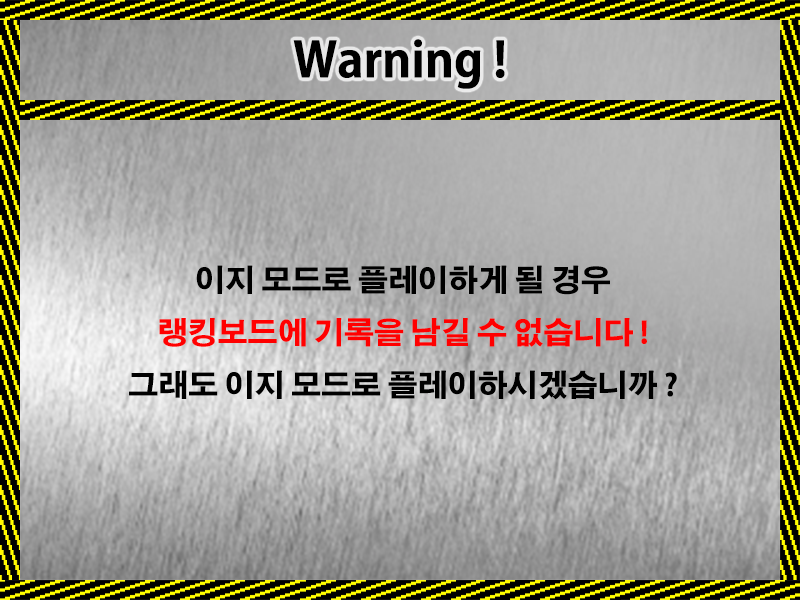
<style>
.page{position:relative;width:800px;height:600px}
.page>*{position:absolute;margin:0}
.t1{font:48.2px "AdobeGothicStd-Bold";color:#000000}
.t2{font:30px "AdobeGothicStd-Bold";color:#000000}
.t3{font:30px "AdobeGothicStd-Bold";color:#ff0000}
</style>
<div class="page">
<p class="t1" style="left:293px;top:39px;width:212px;height:50px">Warning !</p>
<p class="t2" style="left:129px;top:265px;width:548px;height:135px;text-align:center">이지 모드로 플레이하게 될 경우<br><span class="t3">랭킹보드에 기록을 남길 수 없습니다 !<br></span>그래도 이지 모드로 플레이하시겠습니까 ?</p>
</div>
